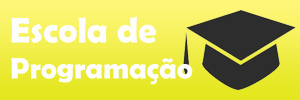
<style>
.page{position:relative;width:300px;height:100px}
.page>*{position:absolute;margin:0}
.t1{font:30px "BerlinSansFBDemi-Bold";color:#fdfdfd}
.t2{font:36px "BerlinSansFBDemi-Bold";color:#fdfdfd}
</style>
<div class="page">
<p class="t1" style="left:11px;top:17px;width:182px;height:68px"><span class="t2">Escola de<br></span>Programação</p>
</div>
